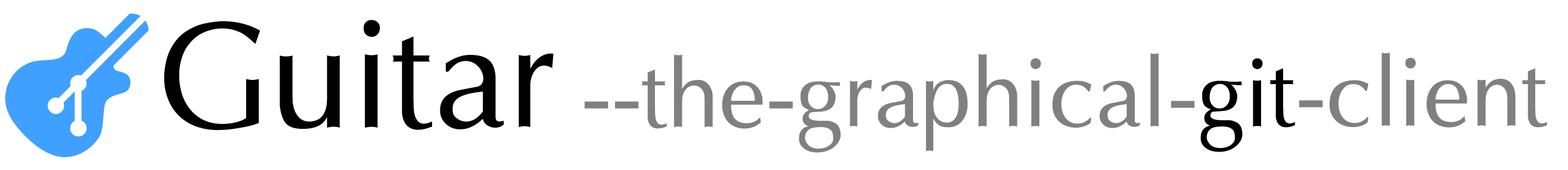
<style>
.page{position:relative;width:1568px;height:170px;background:#ffffff}
.page>*{position:absolute;margin:0}
.t1{font:95.4px "Optima";color:#808080}
.t2{font:151.1px "Optima";color:#000000}
.t3{font:95.4px "Optima";color:#000000}
</style>
<div class="page">
<p class="t1" style="left:164px;top:20px;width:1383px;height:133px"><span class="t2">Guitar </span>--the-graphical-<span class="t3">git</span>-client</p>
</div>
